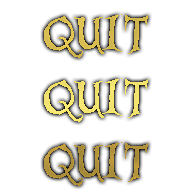
<style>
.page{position:relative;width:192px;height:192px;background:#ffffff}
.page>*{position:absolute;margin:0}
.t1{font:53px "AliceinWonderland";color:#dabd4d}
.t2{font:53px "AliceinWonderland";color:#f4e46c}
.t3{font:53px "AliceinWonderland";color:#b49339}
</style>
<div class="page">
<p class="t1" style="left:44px;top:14px;width:105px;height:44px">QUIT</p>
<p class="t2" style="left:44px;top:78px;width:105px;height:44px">QUIT</p>
<p class="t3" style="left:44px;top:142px;width:105px;height:44px">QUIT</p>
</div>
